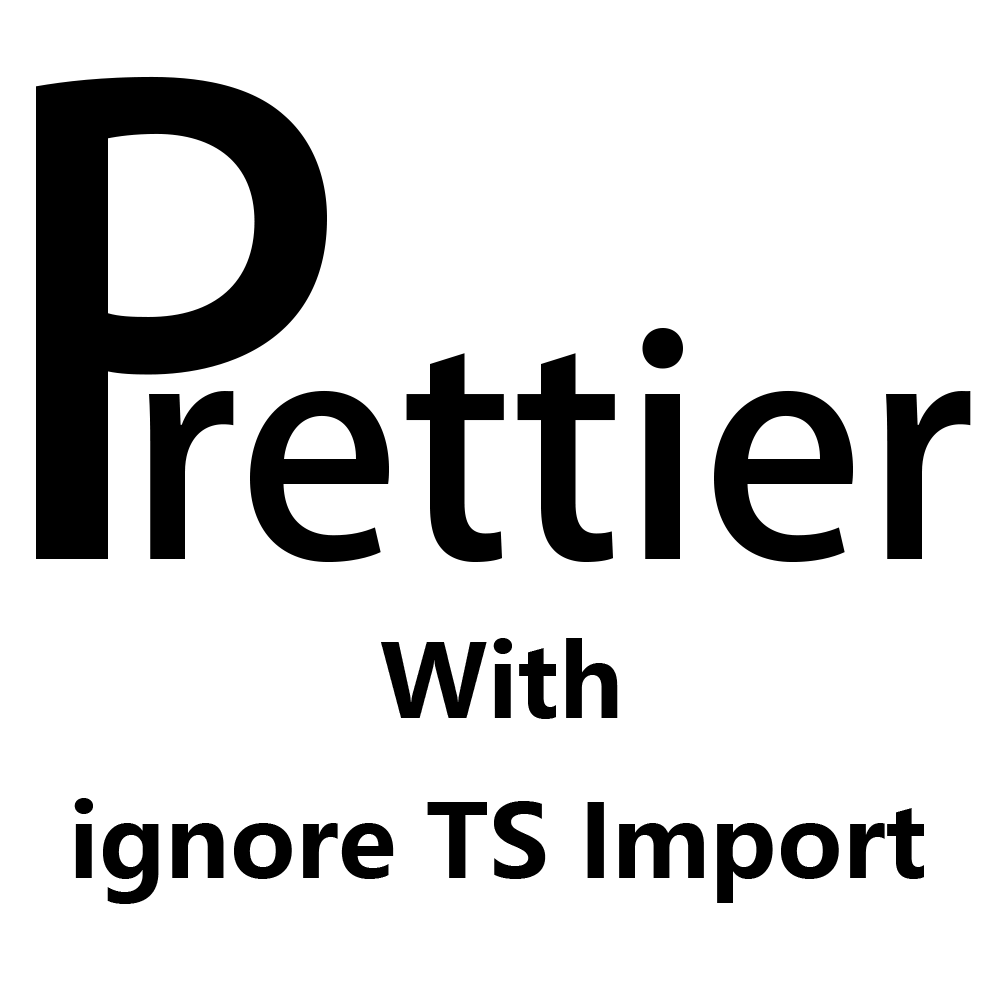
<style>
.page{position:relative;width:1000px;height:1000px;background:#ffffff}
.page>*{position:absolute;margin:0}
.t1{font:625px "AdobeHeitiStd-Regular";color:#000000}
.t2{font:300px "AdobeHeitiStd-Regular";color:#000000}
.t3{font:100px "MicrosoftYaHei-Bold";color:#000000}
</style>
<div class="page">
<p class="t1" style="left:36px;top:76px;width:291px;height:483px">P</p>
<p class="t2" style="left:149px;top:328px;width:822px;height:235px">rettier</p>
<p class="t3" style="left:381px;top:638px;width:237px;height:81px">With</p>
<p class="t3" style="left:74px;top:798px;width:850px;height:106px">ignore TS Import</p>
</div>
